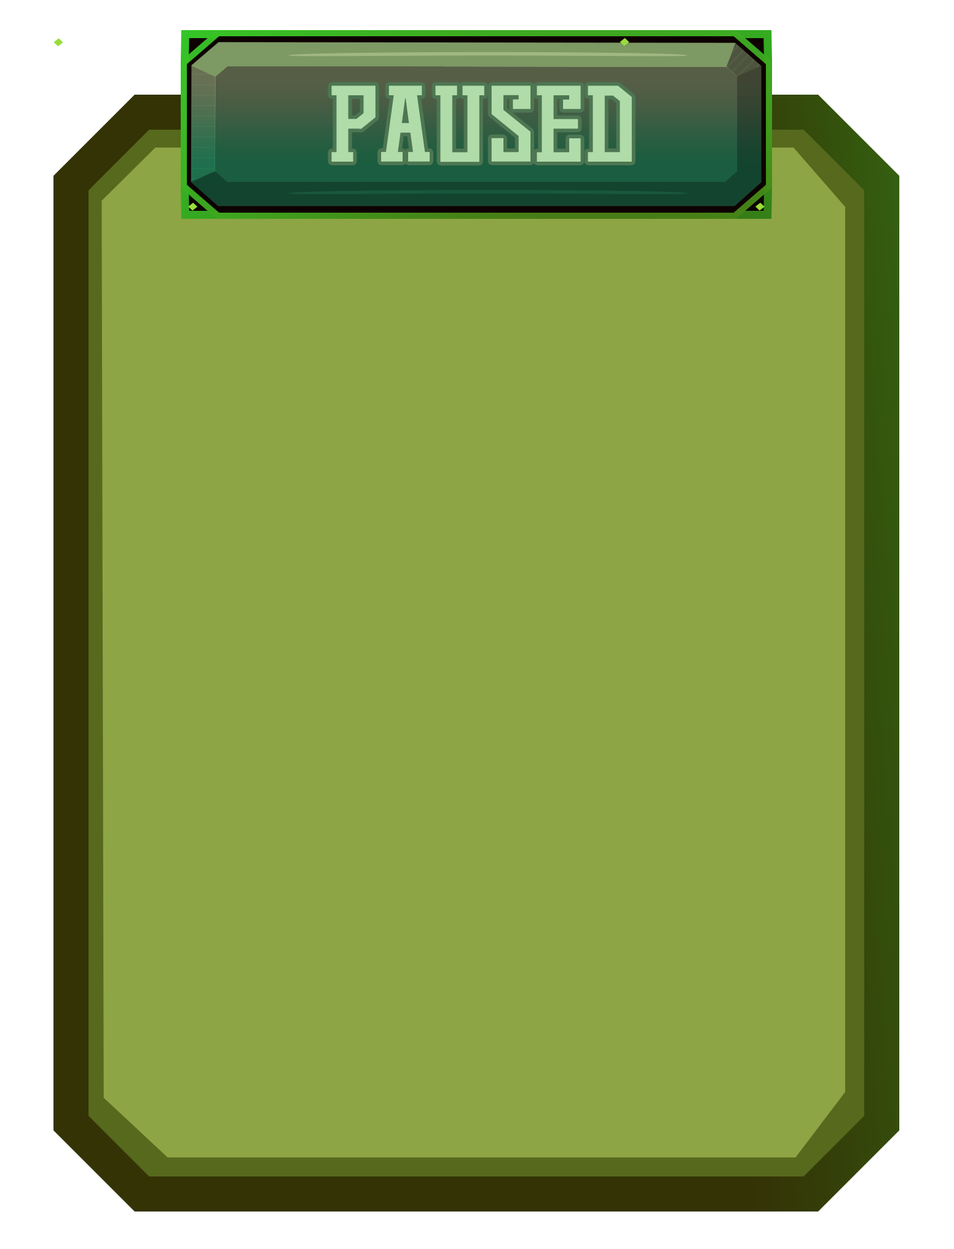
<style>
.page{position:relative;width:954px;height:1249px;background:#8da545}
.page>*{position:absolute;margin:0}
.t1{font:97.8px "Game-Continue-02";color:#b0dca9;text-transform:uppercase;scale:1.23 1}
</style>
<div class="page">
<p class="t1" style="left:331px;top:85px;width:301px;height:77px">paused</p>
</div>
